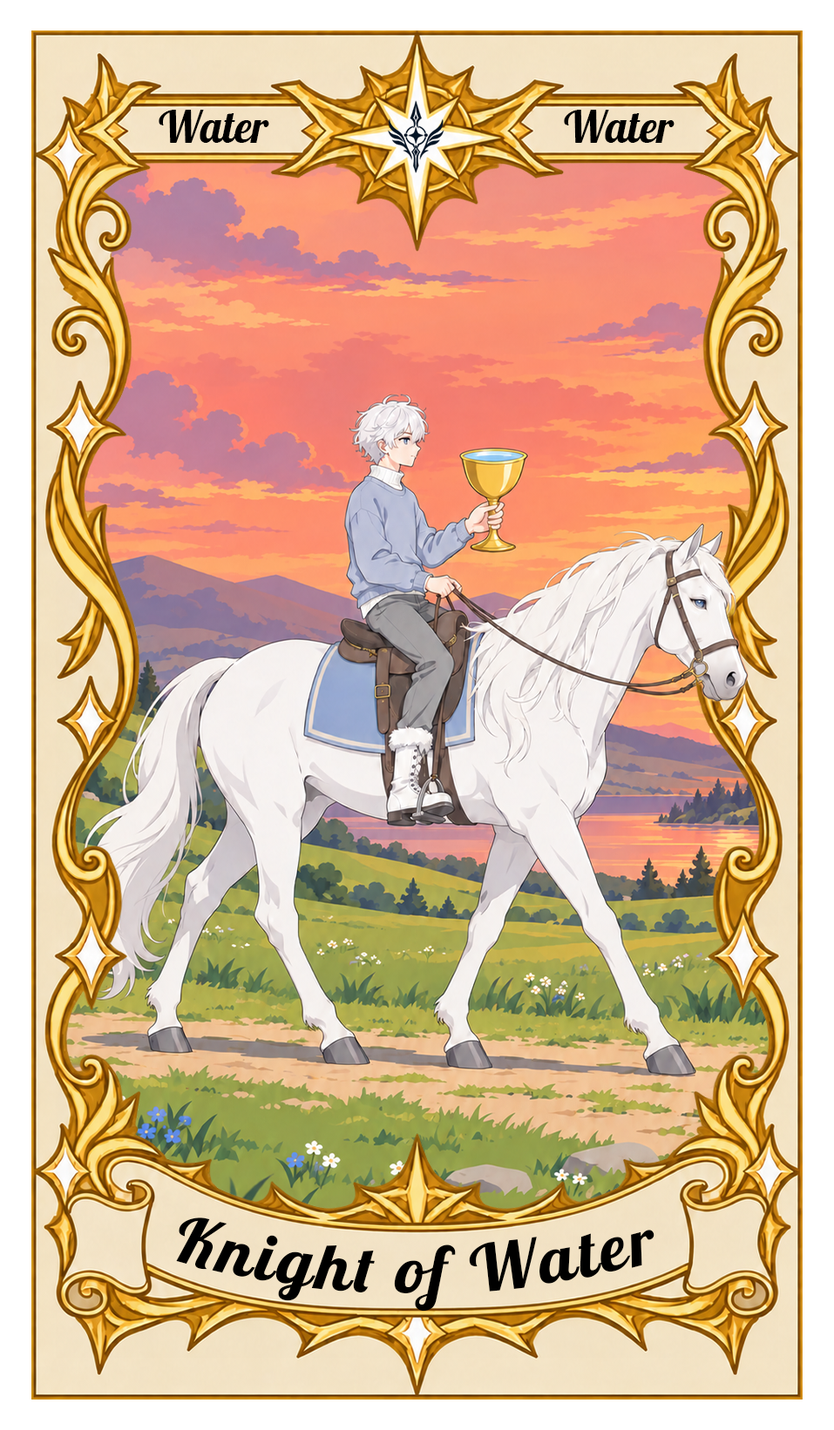
<style>
.page{position:relative;width:834px;height:1430px}
.page>*{position:absolute;margin:0}
.t1{font:43.6px "Lobster-Regular";color:#000000}
.t2{font:65.3px "Lobster-Regular";letter-spacing:0.05em;color:#000000}
</style>
<div class="page">
<p class="t1" style="left:159px;top:110px;width:110px;height:33px">Water</p>
<p class="t1" style="left:564px;top:110px;width:110px;height:33px">Water</p>
<p class="t2" style="left:176px;top:1218px;width:478px;height:94px">Knight of Water</p>
</div>
